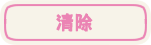
<style>
.page{position:relative;width:151px;height:45px;background:#f7f3e9}
.page>*{position:absolute;margin:0}
.t1{font:12px "shetumodengxiaofangti";color:#eb84b4;font-weight:bold;scale:0.94 1}
</style>
<div class="page">
<p class="t1" style="left:56px;top:13px;width:37px;height:19px">清除</p>
</div>
